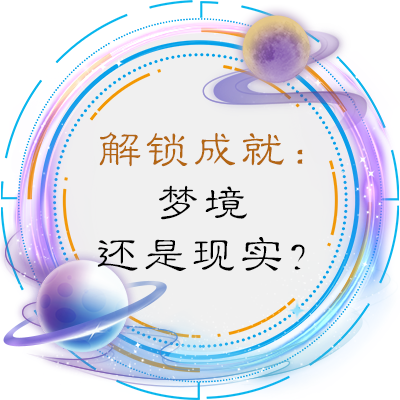
<style>
.page{position:relative;width:400px;height:400px;background:#f0f0f0}
.page>*{position:absolute;margin:0}
.t1{font:48px "STLibianSC-Regular";letter-spacing:0.005em;color:#b36613}
.t2{font:48px "STLibianSC-Regular";color:#000000}
</style>
<div class="page">
<p class="t1" style="left:99px;top:132px;width:204px;height:35px">解锁成就：</p>
<p class="t2" style="left:159px;top:185px;width:88px;height:35px">梦境</p>
<p class="t2" style="left:97px;top:237px;width:208px;height:34px">还是现实？</p>
</div>
